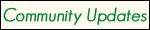
<style>
.page{position:relative;width:150px;height:30px;background:#fffaf0}
.page>*{position:absolute;margin:0}
.t1{font:18px "GeosansLight-Oblique";color:#008135;font-weight:bold}
</style>
<div class="page">
<p class="t1" style="left:3px;top:7px;width:144px;height:18px">Community Updates</p>
</div>
